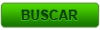
<style>
.page{position:relative;width:100px;height:30px}
.page>*{position:absolute;margin:0}
.t1{font:13.3px "Arial-BoldMT";color:#0d4300}
</style>
<div class="page">
<p class="t1" style="left:21px;top:10px;width:57px;height:10px">BUSCAR</p>
</div>
